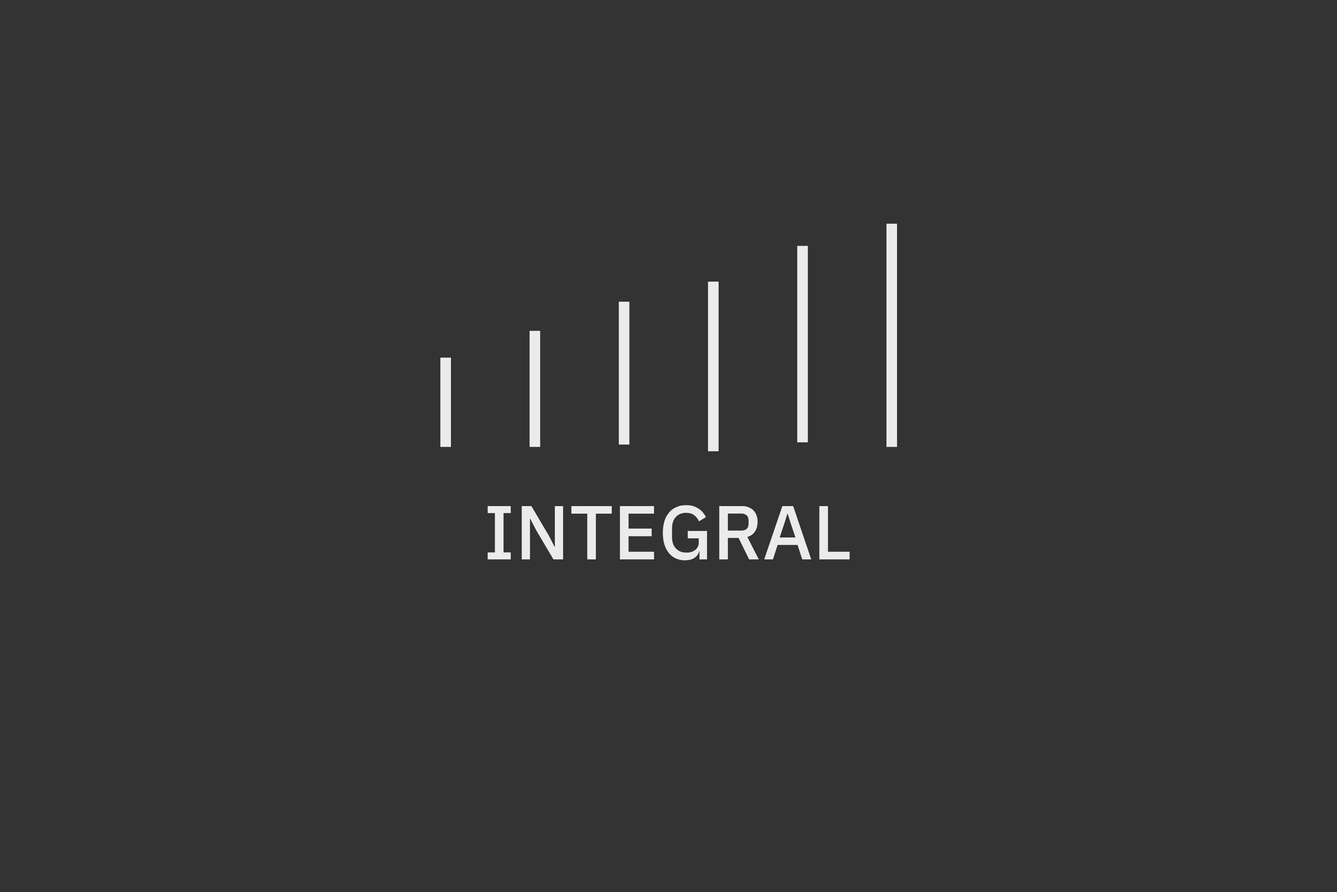
<style>
.page{position:relative;width:1337px;height:892px;background:#333333}
.page>*{position:absolute;margin:0}
.t1{font:76.4px "IBMPlexSans-Medium";color:#ebebeb}
</style>
<div class="page">
<p class="t1" style="left:488px;top:505px;width:362px;height:55px">INTEGRAL</p>
</div>
